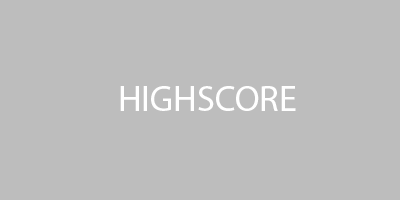
<style>
.page{position:relative;width:400px;height:200px;background:#bdbdbd}
.page>*{position:absolute;margin:0}
.t1{font:36px "MyriadPro-Regular";color:#ffffff}
</style>
<div class="page">
<p class="t1" style="left:120px;top:86px;width:176px;height:25px">HIGHSCORE</p>
</div>
